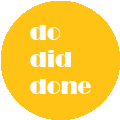
<style>
.page{position:relative;width:120px;height:120px;background:#ffc315}
.page>*{position:absolute;margin:0}
.t1{font:22.8px "Broadway";color:#ffffff}
</style>
<div class="page">
<p class="t1" style="left:30px;top:25px;width:61px;height:69px">do<br>did<br>done</p>
</div>
